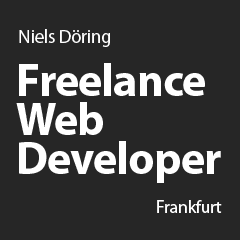
<style>
.page{position:relative;width:240px;height:240px;background:#262626}
.page>*{position:absolute;margin:0}
.t1{font:19px "MyriadPro-Regular";letter-spacing:-0.02em;color:#ffffff}
.t2{font:46px/38px "MyriadPro-Bold";letter-spacing:-0.02em;color:#ffffff}
.t3{font:18px "MyriadPro-Regular";letter-spacing:-0.02em;color:#ffffff}
</style>
<div class="page">
<p class="t1" style="left:19px;top:29px;width:91px;height:18px">Niels Döring</p>
<p class="t2" style="left:16px;top:63px;width:205px;height:120px">Freelance <br>Web <br>Developer</p>
<p class="t3" style="left:157px;top:200px;width:65px;height:13px">Frankfurt</p>
</div>
